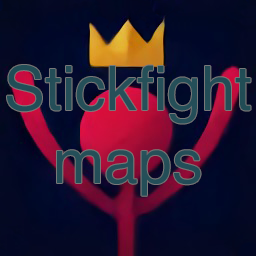
<style>
.page{position:relative;width:256px;height:256px}
.page>*{position:absolute;margin:0}
.t1{font:61.3px "Helvetica";color:#244e58}
</style>
<div class="page">
<p class="t1" style="left:7px;top:65px;width:244px;height:131px;text-align:center">Stickfight<br>maps</p>
</div>
